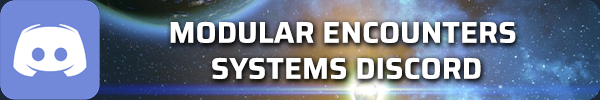
<style>
.page{position:relative;width:600px;height:100px}
.page>*{position:absolute;margin:0}
.t1{font:30px "SairaRoman-Bold";color:#ffffff;text-transform:uppercase;font-weight:bold}
</style>
<div class="page">
<p class="t1" style="left:170px;top:21px;width:346px;height:58px;text-align:center">Modular Encounters <br>Systems Discord</p>
</div>
